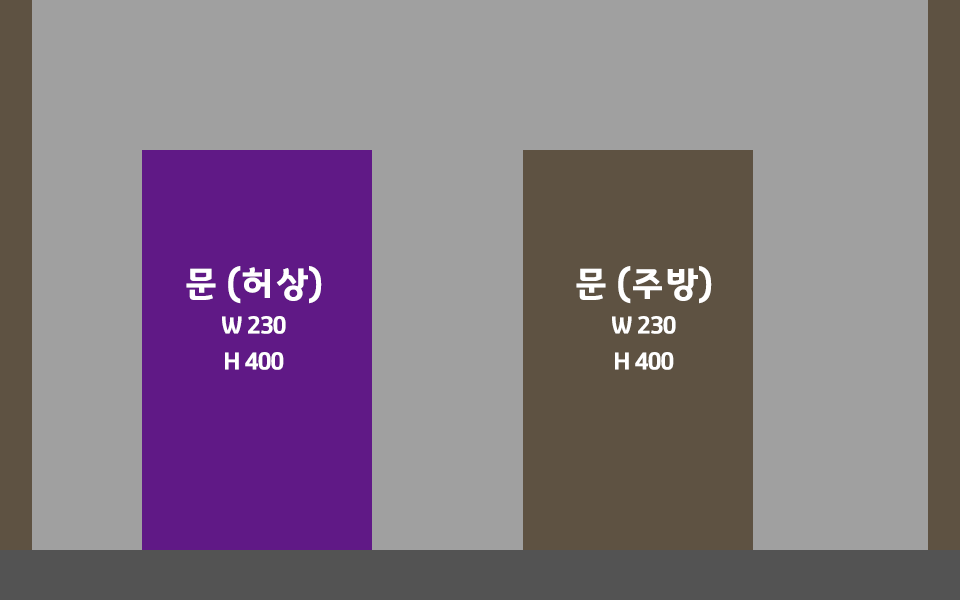
<style>
.page{position:relative;width:960px;height:600px;background:#a0a0a0}
.page>*{position:absolute;margin:0}
.t1{font:24px/36px "GyeonggiTitleV";letter-spacing:-0.05em;color:#ffffff}
.t2{font:36px/12px "GyeonggiTitleV";letter-spacing:-0.05em;color:#ffffff}
</style>
<div class="page">
<p class="t1" style="left:186px;top:266px;width:136px;height:104px;text-align:center"><span class="t2">문 (허상)<br><br><br><br></span>W 230<br>H 400</p>
<p class="t1" style="left:576px;top:266px;width:136px;height:104px;text-align:center"><span class="t2">문 (주방)<br><br><br><br></span>W 230<br>H 400</p>
</div>
